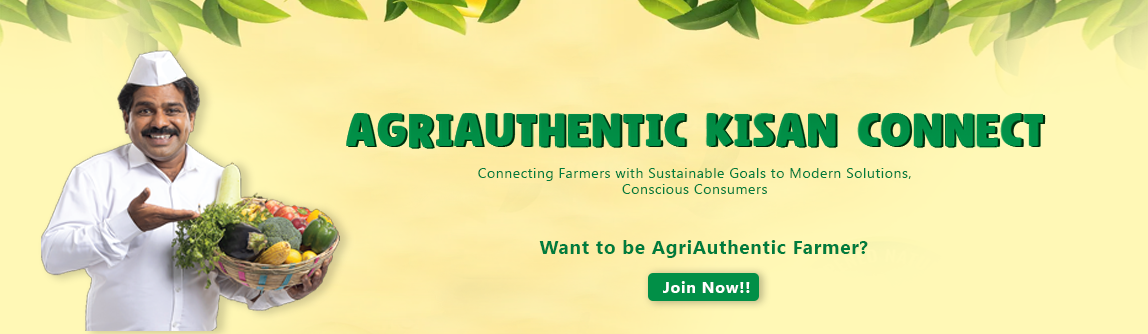
<style>
.page{position:relative;width:1148px;height:334px}
.page>*{position:absolute;margin:0}
.t1{font:51.8px "SuperCorn";letter-spacing:0.04em;color:#018e46}
.t2{font:14px/16px "SegoeUI";letter-spacing:0.04em;color:#007c3d}
.t3{font:18.9px "SegoeUI-Bold";letter-spacing:0.04em;color:#007c3d}
.t4{font:16.2px "SegoeUI-Bold";letter-spacing:0.04em;color:#ffffff}
</style>
<div class="page">
<p class="t1" style="left:346px;top:113px;width:698px;height:35px">AgriAuthentic Kisan Connect</p>
<p class="t2" style="left:478px;top:168px;width:433px;height:26px;text-align:center">Connecting Farmers with Sustainable Goals to Modern Solutions,<br>Conscious Consumers</p>
<p class="t3" style="left:539px;top:240px;width:329px;height:18px">Want to be AgriAuthentic Farmer?</p>
<p class="t4" style="left:663px;top:281px;width:87px;height:12px">Join Now!!</p>
</div>
